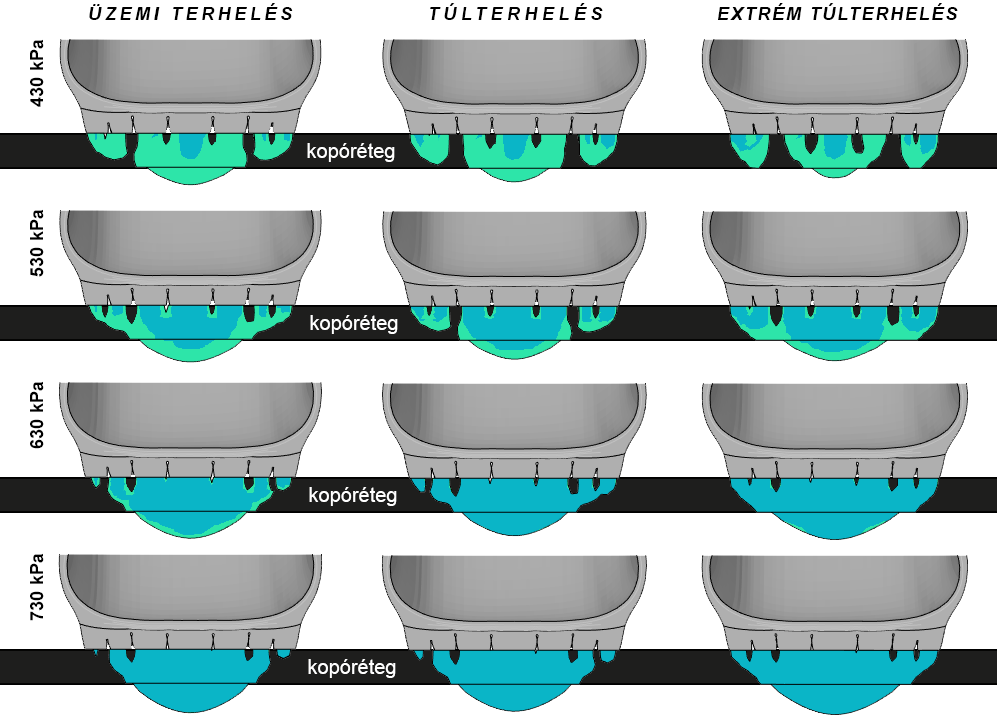
<style>
.page{position:relative;width:997px;height:726px;background:#ffffff}
.page>*{position:absolute;margin:0}
.t1{font:18px "Arial-BoldItalicMT";letter-spacing:0.2em;color:#000000}
.t2{font:18px "Arial-BoldItalicMT";letter-spacing:0.25em;color:#000000}
.t3{font:18px "Arial-BoldItalicMT";letter-spacing:0.1em;color:#000000}
.t4{font:18px "Arial-BoldMT";color:#000000}
.t5{font:20px "ArialMT";color:#ffffff}
</style>
<div class="page">
<p class="t1" style="left:89px;top:3px;width:204px;height:17px">ÜZEMI TERHELÉS</p>
<p class="t2" style="left:430px;top:3px;width:173px;height:17px">TÚLTERHELÉS</p>
<p class="t3" style="left:718px;top:3px;width:240px;height:17px">EXTRÉM TÚLTERHELÉS</p>
<p class="t4" style="left:30px;top:39px;width:14px;height:68px;rotate:-90deg">430 kPa</p>
<p class="t5" style="left:307px;top:143px;width:88px;height:19px">kopóréteg</p>
<p class="t4" style="left:30px;top:209px;width:14px;height:68px;rotate:-90deg">530 kPa</p>
<p class="t5" style="left:310px;top:315px;width:88px;height:19px">kopóréteg</p>
<p class="t4" style="left:30px;top:381px;width:14px;height:68px;rotate:-90deg">630 kPa</p>
<p class="t5" style="left:309px;top:487px;width:88px;height:19px">kopóréteg</p>
<p class="t4" style="left:30px;top:553px;width:14px;height:68px;rotate:-90deg">730 kPa</p>
<p class="t5" style="left:308px;top:659px;width:88px;height:19px">kopóréteg</p>
</div>
